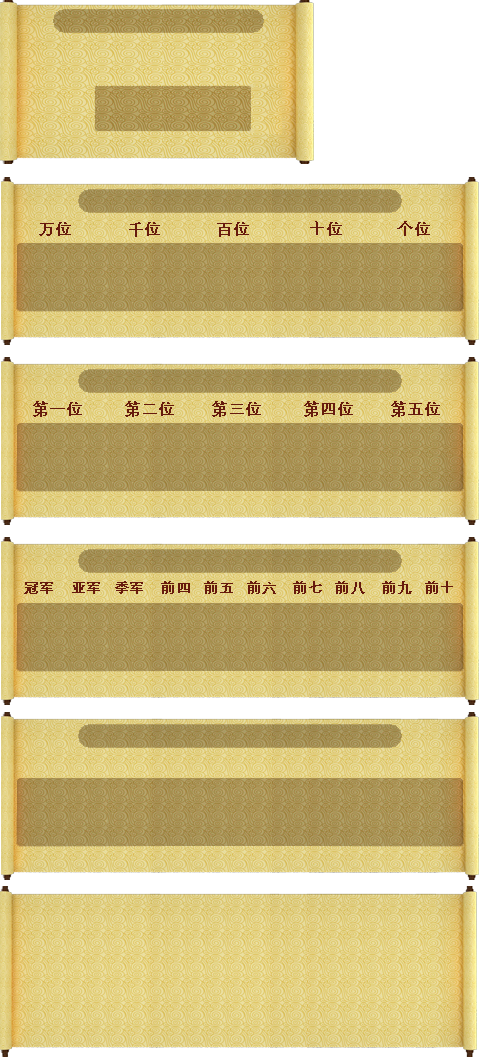
<style>
.page{position:relative;width:500px;height:1058px;background:#ffffff}
.page>*{position:absolute;margin:0}
.t1{font:16px "AdobeHeitiStd-Regular";color:#661a0d;font-weight:bold}
.t2{font:14px "AdobeHeitiStd-Regular";color:#661a0d;font-weight:bold}
</style>
<div class="page">
<p class="t1" style="left:39px;top:221px;width:391px;height:16px">万位            千位            百位             十位            个位</p>
<p class="t1" style="left:33px;top:401px;width:407px;height:16px">第一位         第二位        第三位         第四位        第五位</p>
<p class="t2" style="left:24px;top:581px;width:429px;height:13px">冠军    亚军   季军    前四   前五   前六    前七   前八    前九   前十</p>
</div>
